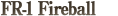
<style>
.page{position:relative;width:118px;height:16px;background:#ffffff}
.page>*{position:absolute;margin:0}
.t1{font:18px "RyuminPro-ExBold";letter-spacing:-0.06em;color:#4a3f32;font-weight:bold;scale:0.9 1}
</style>
<div class="page">
<p class="t1" style="left:1px;top:1px;width:95px;height:15px">FR-1 Fireball</p>
</div>
